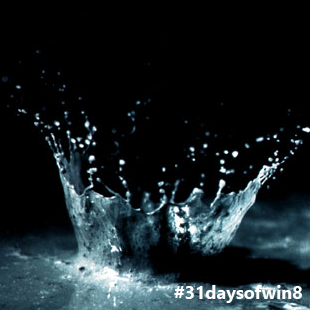
<style>
.page{position:relative;width:310px;height:310px;background:#000000}
.page>*{position:absolute;margin:0}
.t1{font:18px "SegoeUI-Bold";color:#ffffff}
</style>
<div class="page">
<p class="t1" style="left:174px;top:285px;width:128px;height:18px">#31daysofwin8</p>
</div>
